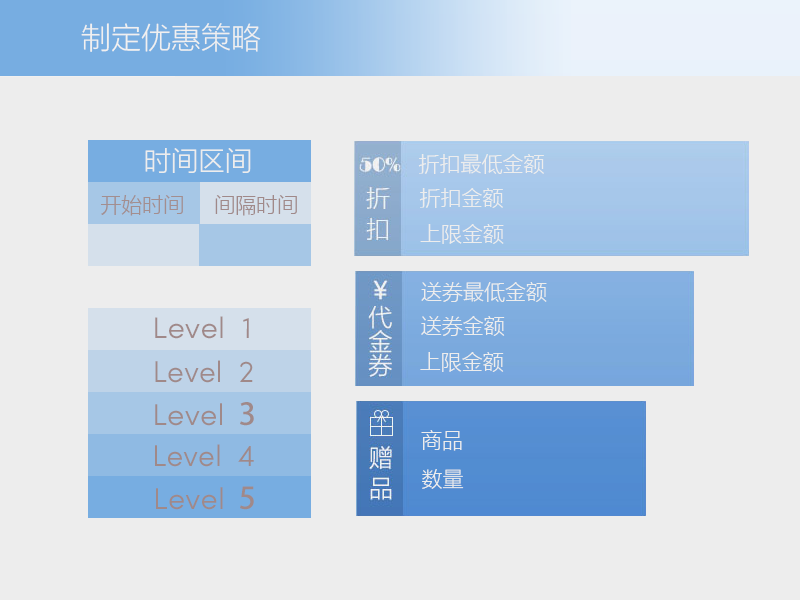
<style>
.page{position:relative;width:800px;height:600px;background:#ededed}
.page>*{position:absolute;margin:0}
.t1{font:30px "MicrosoftYaHeiLight";color:#f1f0f0}
.t2{font:27.1px "MicrosoftYaHeiLight";color:#ededed}
.t3{font:21px "MicrosoftYaHeiLight";color:#ededed}
.t4{font:21px "MicrosoftYaHeiLight";color:#a38e8f}
.t5{font:21px "MicrosoftYaHeiLight";color:#a08989}
.t6{font:29.9px "SofiaProLight";color:#a08989;scale:1.05 1}
.t7{font:30px "SofiaProLight";color:#a08989}
.t8{font:30.1px "SofiaProLight";color:#a08989;scale:1.03 1}
.t9{font:30.1px "AdobeHeitiStd-Regular";color:#a08989;scale:1.03 1}
.t10{font:30.1px "SofiaProLight";color:#a08989}
.t11{font:30.1px "AdobeHeitiStd-Regular";color:#a08989}
</style>
<div class="page">
<p class="t1" style="left:81px;top:23px;width:180px;height:29px">制定优惠策略</p>
<p class="t2" style="left:145px;top:148px;width:106px;height:25px">时间区间</p>
<p class="t3" style="left:418px;top:154px;width:126px;height:20px">折扣最低金额</p>
<p class="t4" style="left:101px;top:195px;width:82px;height:21px">开始时间</p>
<p class="t5" style="left:215px;top:195px;width:82px;height:21px">间隔时间</p>
<p class="t3" style="left:419px;top:188px;width:84px;height:20px">折扣金额</p>
<p class="t3" style="left:420px;top:224px;width:84px;height:20px">上限金额</p>
<p class="t3" style="left:421px;top:282px;width:126px;height:20px">送券最低金额</p>
<p class="t6" style="left:155px;top:316px;width:94px;height:23px">Level  1</p>
<p class="t3" style="left:421px;top:316px;width:84px;height:20px">送券金额</p>
<p class="t3" style="left:420px;top:352px;width:84px;height:20px">上限金额</p>
<p class="t7" style="left:155px;top:360px;width:98px;height:23px">Level  2</p>
<p class="t8" style="left:155px;top:402px;width:99px;height:24px">Level<span class="t9">  3</span></p>
<p class="t3" style="left:421px;top:430px;width:41px;height:21px">商品</p>
<p class="t7" style="left:155px;top:444px;width:99px;height:23px">Level  4</p>
<p class="t3" style="left:422px;top:469px;width:42px;height:20px">数量</p>
<p class="t10" style="left:156px;top:486px;width:98px;height:24px">Level<span class="t11">  5</span></p>
</div>
